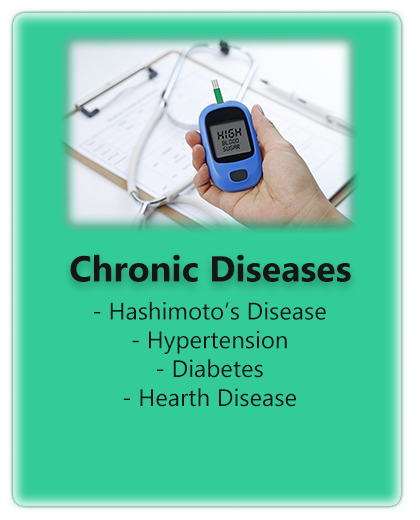
<style>
.page{position:relative;width:420px;height:520px;background:#33cc99}
.page>*{position:absolute;margin:0}
.t1{font:36px "Gadugi-Bold";color:#151515}
.t2{font:24px "Gadugi";color:#151515}
</style>
<div class="page">
<p class="t1" style="left:70px;top:254px;width:281px;height:28px">Chronic Diseases</p>
<p class="t2" style="left:94px;top:301px;width:232px;height:106px;text-align:center">- Hashimoto’s Disease<br>- Hypertension<br>- Diabetes<br>- Hearth Disease</p>
</div>
